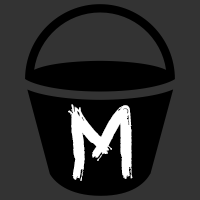
<style>
.page{position:relative;width:200px;height:200px;background:#333333}
.page>*{position:absolute;margin:0}
.t1{font:72px "StiffBrushJK";color:#ffffff}
</style>
<div class="page">
<p class="t1" style="left:68px;top:104px;width:65px;height:77px">M</p>
</div>
